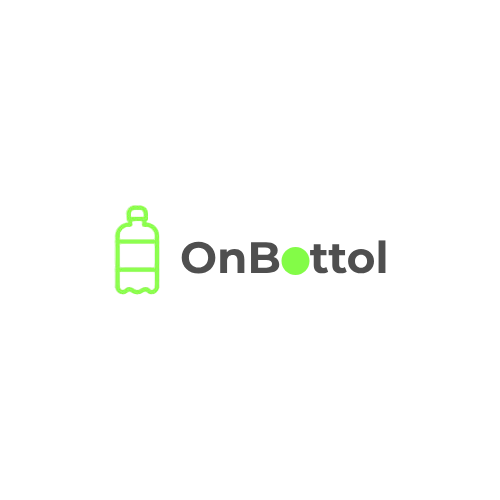
<style>
.page{position:relative;width:500px;height:500px;background:#ffffff}
.page>*{position:absolute;margin:0}
.t1{font:43.9px "Montserrat-Bold";color:#4f4f4f}
</style>
<div class="page">
<p class="t1" style="left:181px;top:240px;width:205px;height:34px">OnBottol</p>
</div>
